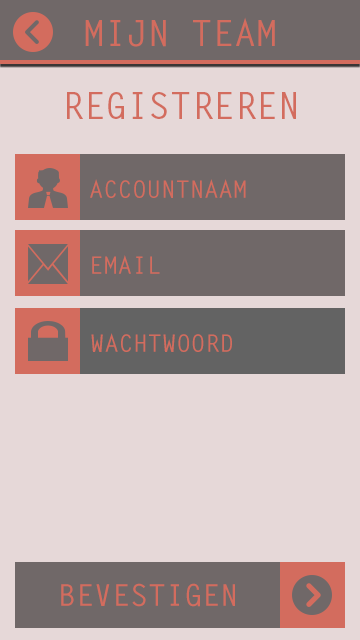
<style>
.page{position:relative;width:360px;height:640px;background:#e6d8d8}
.page>*{position:absolute;margin:0}
.t1{font:36px "LetterGothicStd-Bold";color:#d36c5e}
.t2{font:24px "LetterGothicStd-Bold";color:#d36c5e}
.t3{font:30px "LetterGothicStd-Bold";color:#d36c5e}
</style>
<div class="page">
<p class="t1" style="left:85px;top:17px;width:190px;height:30px">MIJN TEAM</p>
<p class="t1" style="left:67px;top:92px;width:229px;height:27px">REGISTREREN</p>
<p class="t2" style="left:90px;top:179px;width:156px;height:19px">ACCOUNTNAAM</p>
<p class="t2" style="left:92px;top:255px;width:68px;height:19px">EMAIL</p>
<p class="t2" style="left:91px;top:333px;width:141px;height:19px">WACHTWOORD</p>
<p class="t3" style="left:61px;top:583px;width:174px;height:24px">BEVESTIGEN</p>
</div>
